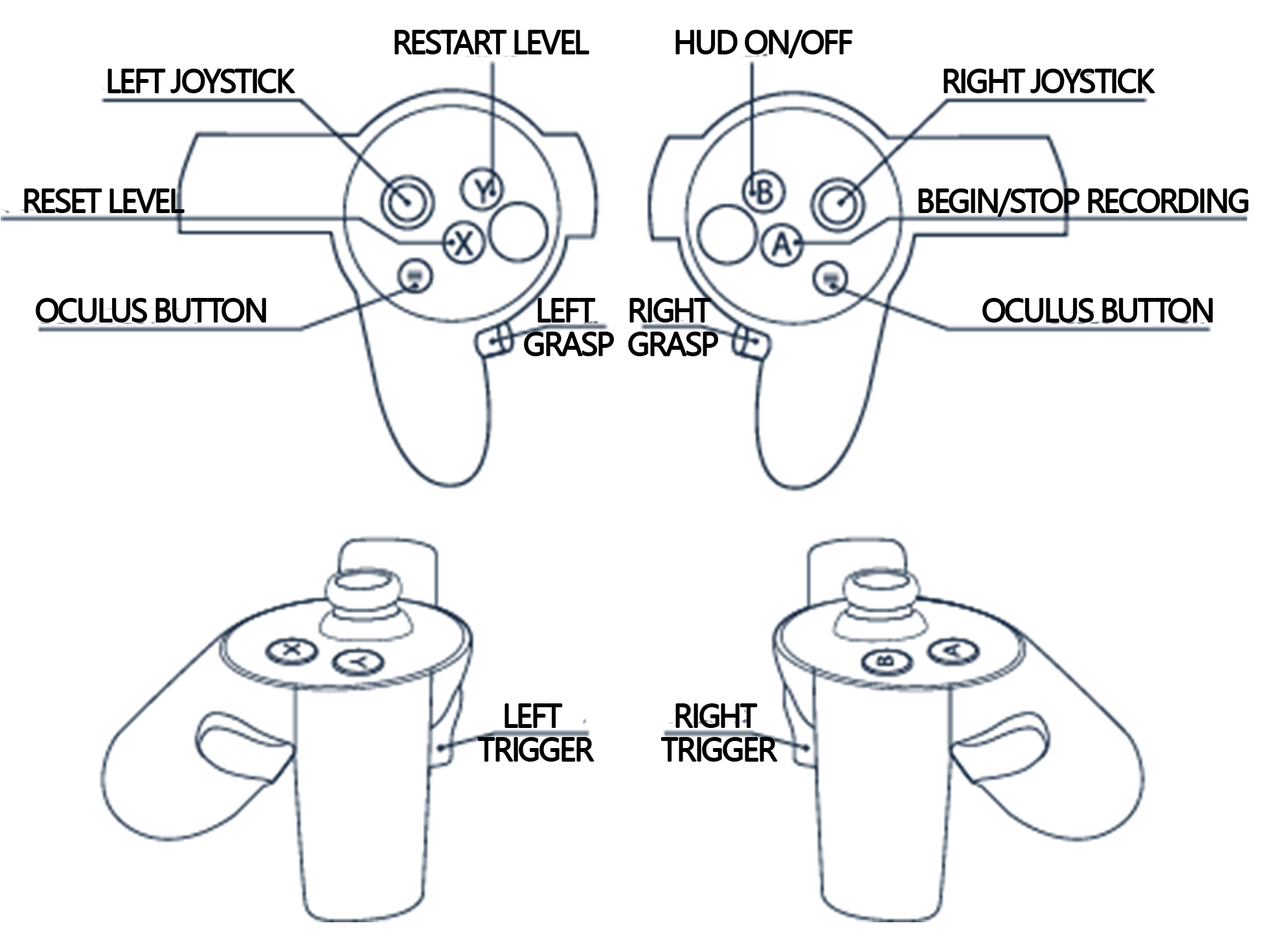
<style>
.page{position:relative;width:1264px;height:943px;background:#ffffff}
.page>*{position:absolute;margin:0}
.t1{font:32.4px "SegoeUISymbol";letter-spacing:-0.05em;color:#000000}
.t2{font:32.4px/33.3px "SegoeUISymbol";letter-spacing:-0.05em;color:#000000}
</style>
<div class="page">
<p class="t1" style="left:395px;top:30px;width:194px;height:24px">RESTART LEVEL</p>
<p class="t1" style="left:676px;top:30px;width:176px;height:28px">HUD ON/OFF</p>
<p class="t1" style="left:944px;top:69px;width:211px;height:24px">RIGHT JOYSTICK</p>
<p class="t1" style="left:25px;top:189px;width:159px;height:23px">RESET LEVEL</p>
<p class="t1" style="left:919px;top:189px;width:329px;height:27px">BEGIN/STOP RECORDING</p>
<p class="t1" style="left:36px;top:299px;width:230px;height:23px">OCULUS BUTTON</p>
<p class="t2" style="left:525px;top:299px;width:88px;height:57px;text-align:center">LEFT <br>GRASP</p>
<p class="t2" style="left:629px;top:299px;width:89px;height:57px;text-align:center">RIGHT <br>GRASP</p>
<p class="t1" style="left:983px;top:299px;width:230px;height:23px">OCULUS BUTTON</p>
<p class="t2" style="left:479px;top:704px;width:115px;height:57px;text-align:center">LEFT <br>TRIGGER</p>
<p class="t2" style="left:662px;top:704px;width:115px;height:57px;text-align:center">RIGHT <br>TRIGGER</p>
</div>
